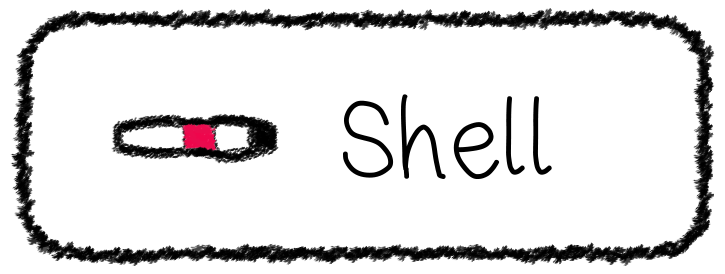
<style>
.page{position:relative;width:725px;height:274px;background:#ffffff}
.page>*{position:absolute;margin:0}
.t1{font:120px "RiseStarHand";color:#000000}
</style>
<div class="page">
<p class="t1" style="left:343px;top:94px;width:209px;height:85px">Shell</p>
</div>
